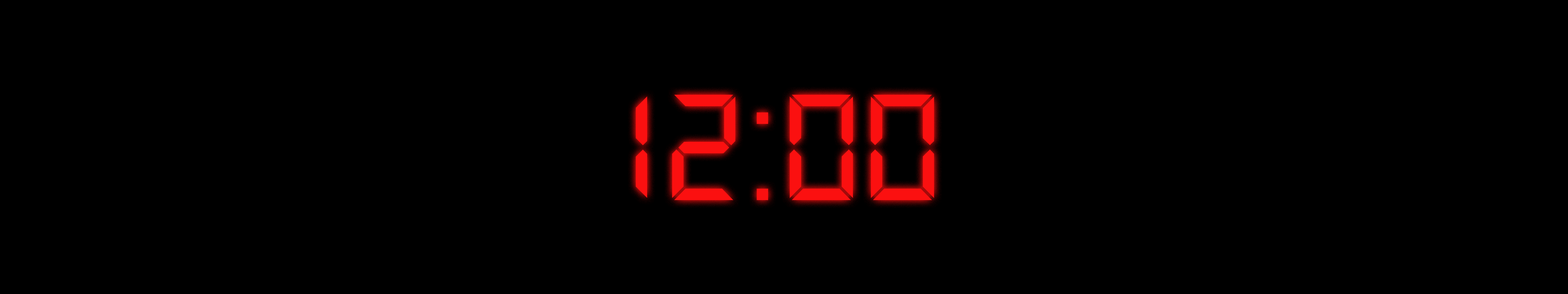
<style>
.page{position:relative;width:1568px;height:294px;background:#000000}
.page>*{position:absolute;margin:0}
.t1{font:165.7px "DS-Digital";color:#fb1010}
</style>
<div class="page">
<p class="t1" style="left:636px;top:95px;width:298px;height:105px">12:00</p>
</div>
